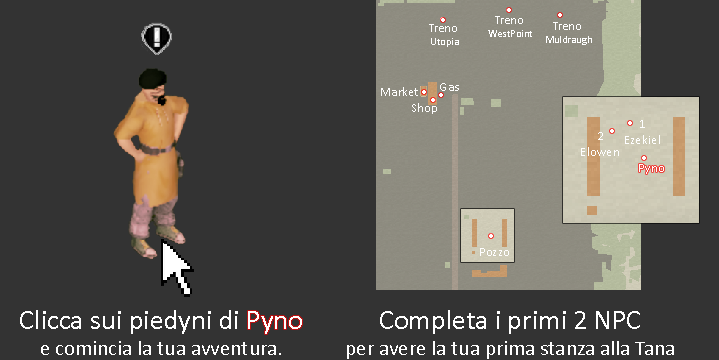
<style>
.page{position:relative;width:719px;height:360px;background:#333333}
.page>*{position:absolute;margin:0}
.t1{font:10.7px "Calibri";color:#ffffff}
.t2{font:12px "Calibri";color:#ffffff}
.t3{font:13.3px "Calibri";color:#ffffff}
.t4{font:21.3px "Calibri";color:#ffffff}
.t5{font:28px "Calibri";color:#ffffff}
</style>
<div class="page">
<p class="t1" style="left:488px;top:16px;width:44px;height:21px;text-align:center"><span class="t2">Treno <br></span>WestPoint</p>
<p class="t1" style="left:429px;top:24px;width:30px;height:23px;text-align:center"><span class="t2">Treno <br></span>Utopia</p>
<p class="t1" style="left:546px;top:22px;width:46px;height:23px;text-align:center"><span class="t2">Treno <br></span>Muldraugh</p>
<p class="t3" style="left:381px;top:87px;width:37px;height:9px">Market</p>
<p class="t3" style="left:440px;top:83px;width:19px;height:8px">Gas</p>
<p class="t3" style="left:412px;top:103px;width:25px;height:11px">Shop</p>
<p class="t3" style="left:625px;top:120px;width:35px;height:24px;text-align:center">1<br>Ezekiel</p>
<p class="t3" style="left:581px;top:132px;width:38px;height:24px;text-align:center">2<br>Elowen</p>
<p class="t3" style="left:639px;top:164px;width:25px;height:10px">Pyno</p>
<p class="t3" style="left:480px;top:248px;width:29px;height:8px">Pozzo</p>
<p class="t4" style="left:20px;top:310px;width:282px;height:45px;text-align:center"><span class="t5">Clicca sui piedyni di Pyno<br></span>e comincia la tua avventura.</p>
<p class="t4" style="left:347px;top:310px;width:327px;height:49px;text-align:center"><span class="t5">Completa i primi 2 NPC<br></span>per avere la tua prima stanza alla Tana</p>
</div>
